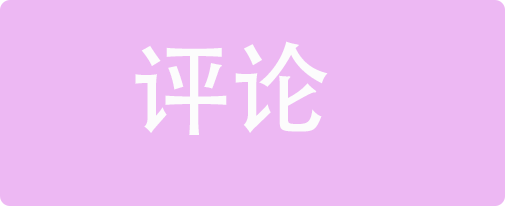
<style>
.page{position:relative;width:505px;height:206px;background:#edb8f3}
.page>*{position:absolute;margin:0}
.t1{font:100px "AdobeHeitiStd-Regular";color:#fcfcfc}
</style>
<div class="page">
<p class="t1" style="left:135px;top:41px;width:193px;height:94px">评论</p>
</div>
